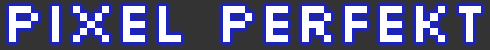
<style>
.page{position:relative;width:490px;height:50px;background:#333333}
.page>*{position:absolute;margin:0}
.t1{font:60px "Silkscreen";color:#ffffff}
</style>
<div class="page">
<p class="t1" style="left:9px;top:6px;width:472px;height:36px">PIXEL PERFEkT</p>
</div>
